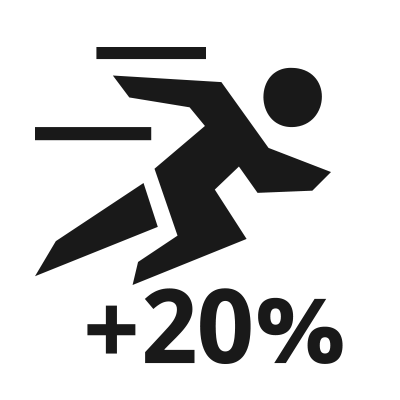
<style>
.page{position:relative;width:400px;height:400px;background:#ffffff}
.page>*{position:absolute;margin:0}
.t1{font:103.2px "NotoSans-Bold";color:#191919}
</style>
<div class="page">
<p class="t1" style="left:87px;top:288px;width:256px;height:76px">+20%</p>
</div>
